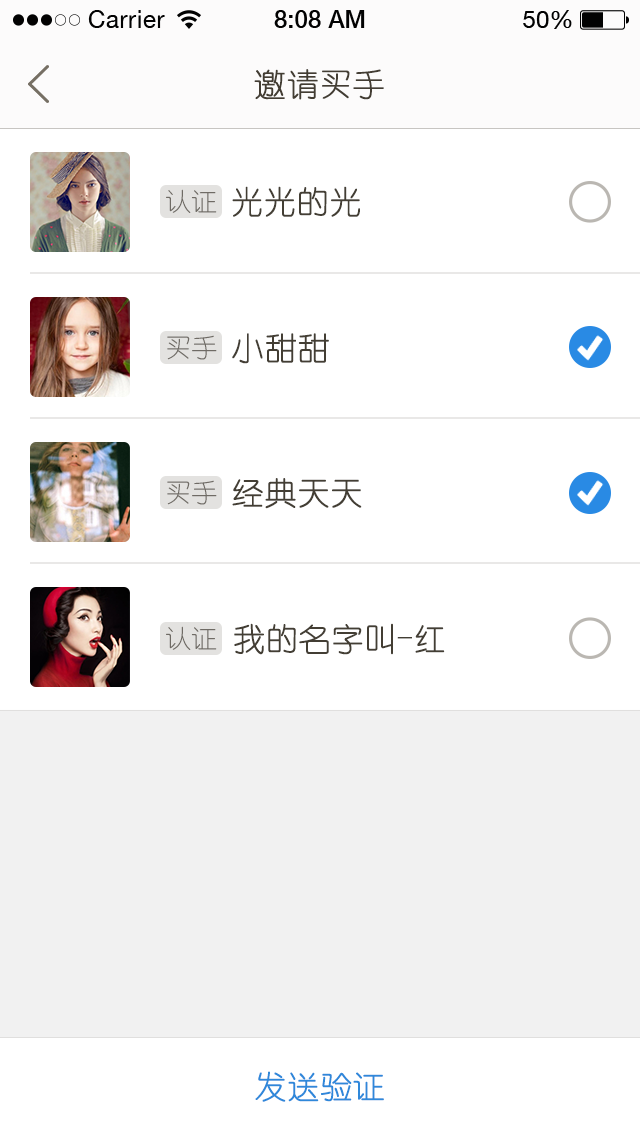
<style>
.page{position:relative;width:640px;height:1136px;background:#ffffff}
.page>*{position:absolute;margin:0}
.t1{font:32px "YouYuan";color:#433d33;text-transform:uppercase;font-weight:bold}
.t2{font:26px "YouYuan";color:#6f6b65;text-transform:uppercase}
.t3{font:32px "YouYuan";color:#433e34;text-transform:uppercase;font-weight:bold}
.t4{font:32px "YouYuan";color:#2f88da;text-transform:uppercase;font-weight:bold}
</style>
<div class="page">
<p class="t1" style="left:254px;top:69px;width:130px;height:31px">邀请买手</p>
<p class="t2" style="left:166px;top:189px;width:51px;height:24px">认证</p>
<p class="t3" style="left:232px;top:186px;width:128px;height:31px">光光的光</p>
<p class="t2" style="left:167px;top:335px;width:50px;height:25px">买手</p>
<p class="t3" style="left:232px;top:333px;width:97px;height:31px">小甜甜</p>
<p class="t2" style="left:167px;top:480px;width:50px;height:25px">买手</p>
<p class="t3" style="left:232px;top:478px;width:130px;height:31px">经典天天</p>
<p class="t2" style="left:166px;top:626px;width:51px;height:24px">认证</p>
<p class="t3" style="left:234px;top:623px;width:211px;height:32px">我的名字叫-红</p>
<p class="t4" style="left:255px;top:1071px;width:129px;height:31px">发送验证</p>
</div>
